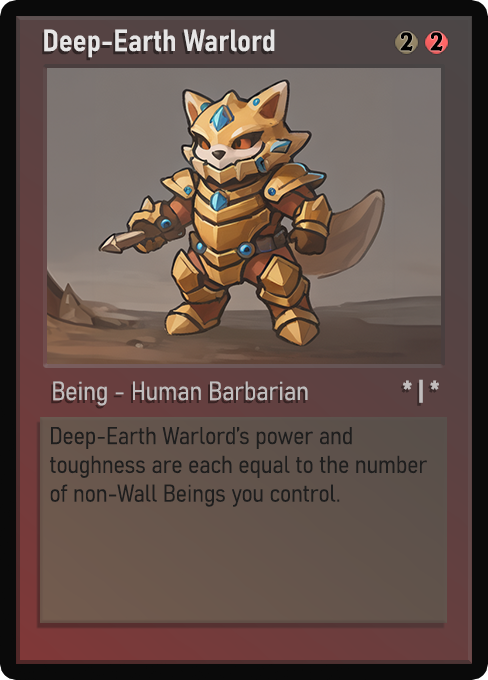
<style>
.page{position:relative;width:488px;height:680px}
.page>*{position:absolute;margin:0}
.t1{font:30px "Bahnschrift-SemiBoldSemiCondensed";color:#f2f2f2;font-weight:bold}
.t2{font:25px "WTRRoycroft";color:#000000;font-weight:bold;scale:1.09 1}
.t3{font:26px "Bahnschrift-LightSemiCondensed";color:#c8c8c8;font-weight:bold}
.t4{font:26px "Bahnschrift-BoldSemiCondensed";color:#c1bdbd;font-weight:bold}
.t5{font:24px "Bahnschrift-LightSemiCondensed";color:#1e1e1e;font-weight:bold}
</style>
<div class="page">
<p class="t1" style="left:44px;top:29px;width:231px;height:29px;opacity:0.9">Deep-Earth Warlord</p>
<p class="t2" style="left:400px;top:32px;width:13px;height:19px">2</p>
<p class="t2" style="left:430px;top:32px;width:13px;height:19px">2</p>
<p class="t3" style="left:53px;top:381px;width:255px;height:25px;opacity:0.9">Being - Human Barbarian</p>
<p class="t4" style="left:403px;top:379px;width:36px;height:24px">* | *</p>
<p class="t5" style="left:50px;top:427px;width:377px;height:80px">Deep-Earth Warlord’s power and toughness are each equal to the number of non-Wall Beings you control.</p>
</div>
